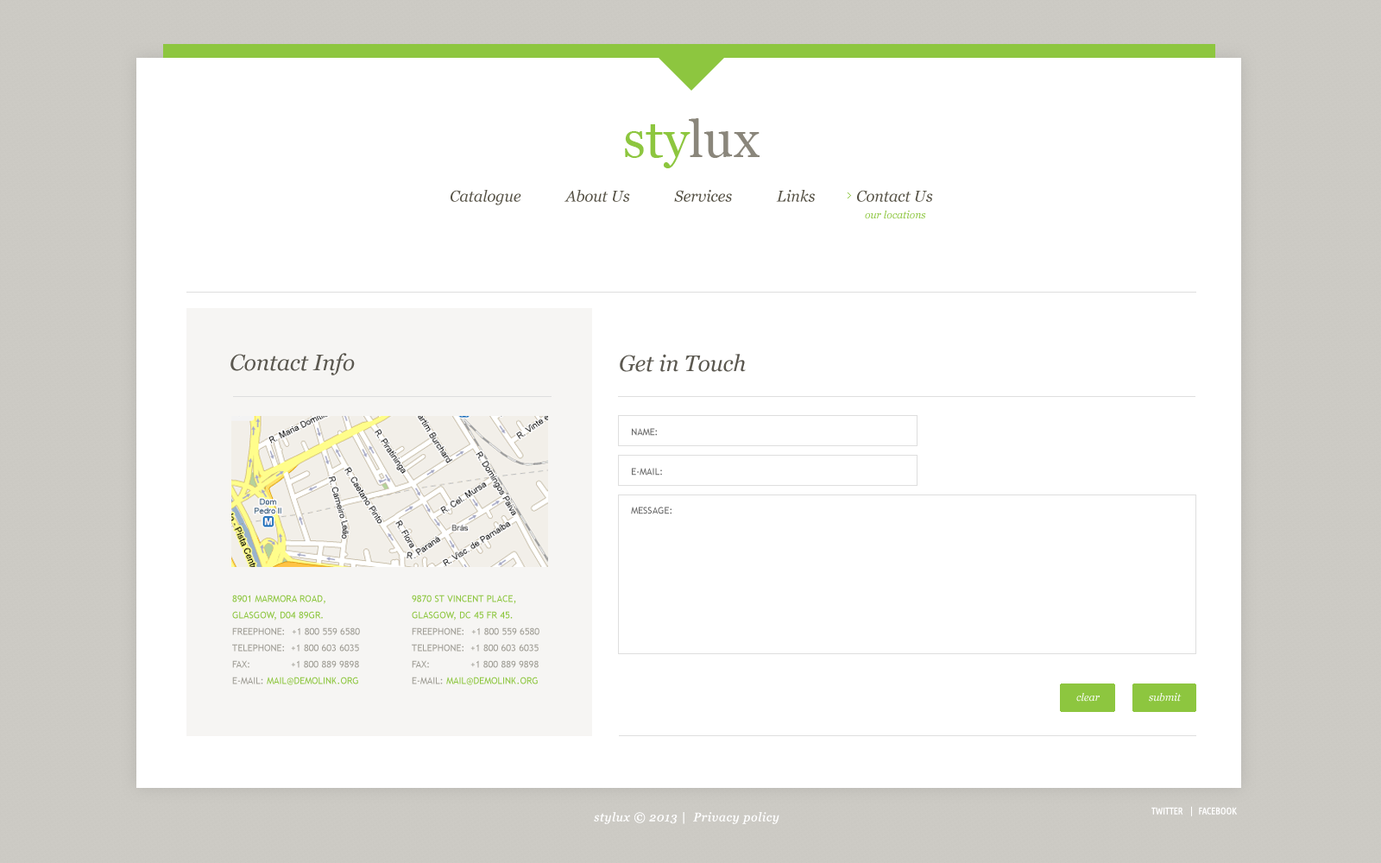
<style>
.page{position:relative;width:1381px;height:863px;background:#ffffff}
.page>*{position:absolute;margin:0}
.t1{font:51.8px "Georgia";color:#8dc63f}
.t2{font:51.8px "Georgia";color:#8a867b}
.t3{font:15.5px "Georgia-Italic";color:#565246}
.t4{font:10.4px "Georgia-Italic";color:#8dc63f}
.t5{font:22.4px "Georgia-Italic";color:#5b5850}
.t6{font:9.5px "TrebuchetMS";color:#666666;text-transform:uppercase}
.t7{font:9.5px/16.4px "TrebuchetMS";color:#9e9c94;text-transform:uppercase}
.t8{font:10.4px/17.3px "TrebuchetMS";color:#9e9c94;text-transform:uppercase}
.t9{font:9.5px/16.4px "TrebuchetMS";color:#8dc63f;text-transform:uppercase}
.t10{font:10.4px/17.3px "TrebuchetMS";color:#5e5e5e;text-transform:uppercase}
.t11{font:10.4px "Georgia-Italic";color:#ffffff}
.t12{font:9.5px "UbuntuCondensed-Regular";color:#ffffff;text-transform:uppercase}
.t13{font:12.1px "Georgia-Italic";letter-spacing:0.05em;color:#ffffff}
</style>
<div class="page">
<p class="t1" style="left:625px;top:118px;width:135px;height:50px">sty<span class="t2">lux</span></p>
<p class="t3" style="left:451px;top:190px;width:482px;height:15px">Catalogue            About Us            Services            Links           Contact Us</p>
<p class="t4" style="left:865px;top:211px;width:61px;height:8px">our locations</p>
<p class="t5" style="left:230px;top:353px;width:125px;height:23px">Contact Info</p>
<p class="t5" style="left:620px;top:354px;width:126px;height:18px">Get in Touch</p>
<p class="t6" style="left:632px;top:428px;width:25px;height:8px">Name:</p>
<p class="t6" style="left:632px;top:468px;width:30px;height:8px">E-mail:</p>
<p class="t6" style="left:631px;top:507px;width:41px;height:8px">Message:</p>
<p class="t7" style="left:232px;top:595px;width:128px;height:90px"><span class="t8"><br></span><span class="t9">8901 Marmora Road,<br>Glasgow, D04 89GR.<br></span>Freephone:  +1 800 559 6580<br>Telephone:  +1 800 603 6035<br>FAX:              +1 800 889 9898 <br>E-mail: <span class="t9">mail@demolink.org<br><br></span><span class="t10">brandon Farrel</span></p>
<p class="t7" style="left:412px;top:595px;width:128px;height:90px"><span class="t8"><br></span><span class="t9">9870 St Vincent Place,<br>Glasgow, DC 45 Fr 45.<br></span>Freephone:  +1 800 559 6580<br>Telephone:  +1 800 603 6035<br>FAX:              +1 800 889 9898 <br>E-mail: <span class="t9">mail@demolink.org<br><br></span><span class="t10">brandon Farrel</span></p>
<p class="t11" style="left:1077px;top:693px;width:23px;height:9px">clear</p>
<p class="t11" style="left:1149px;top:693px;width:33px;height:9px">submit</p>
<p class="t12" style="left:1152px;top:806px;width:85px;height:11px">twitter    |   facebook</p>
<p class="t13" style="left:594px;top:812px;width:186px;height:12px">stylux © 2013 |  Privacy policy</p>
</div>
